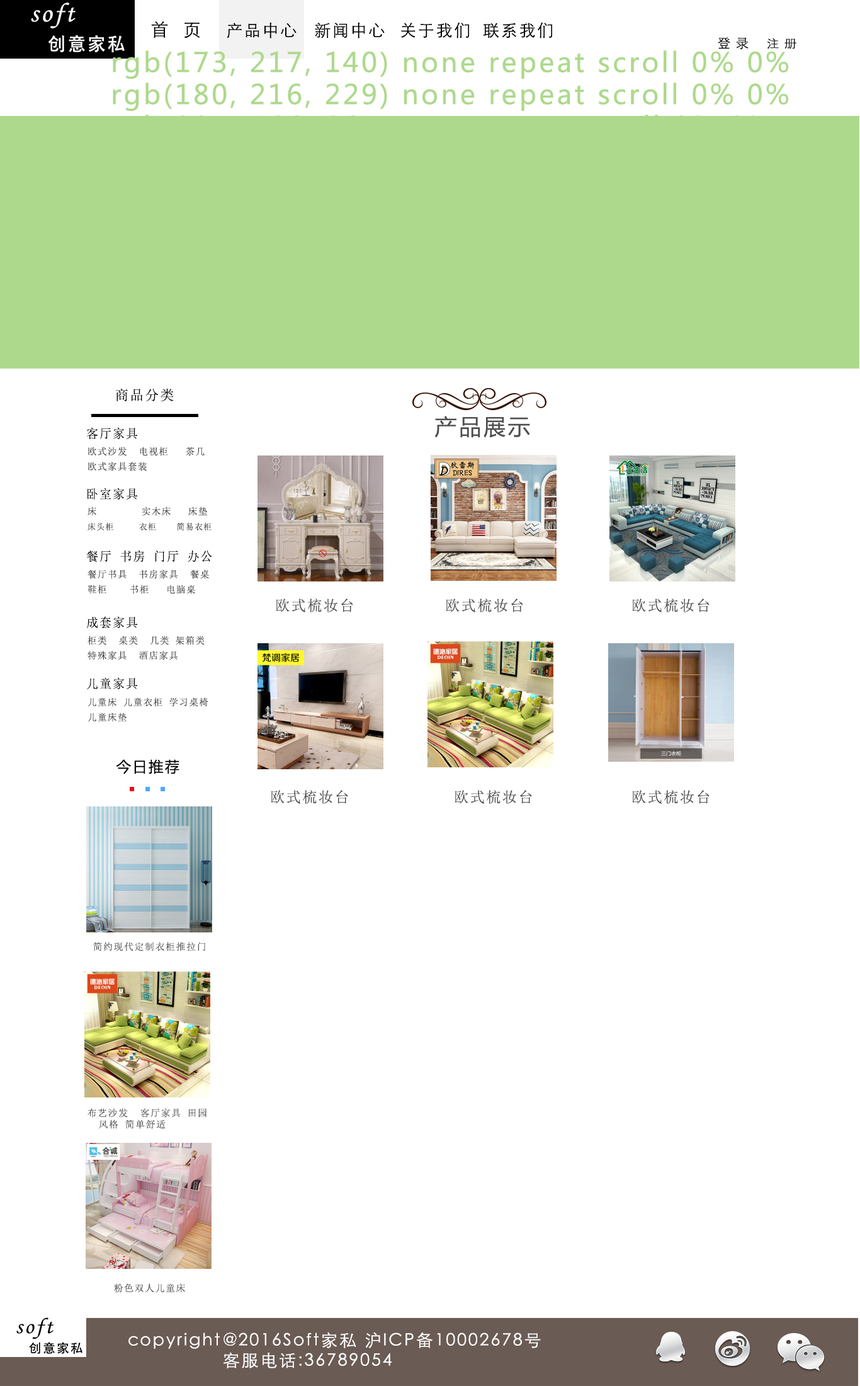
<style>
.page{position:relative;width:860px;height:1386px;background:#ffffff}
.page>*{position:absolute;margin:0}
.t1{font:26.9px "MonotypeCorsiva";letter-spacing:0.1em;color:#ffffff}
.t2{font:17.6px "STXihei";letter-spacing:0.1em;color:#000000}
.t3{font:16.5px "STXihei";letter-spacing:0.1em;color:#000000}
.t4{font:18.4px "AdobeHeitiStd-Regular";letter-spacing:0.1em;color:#ffffff}
.t5{font:13.1px "STXihei";letter-spacing:0.1em;color:#000000;scale:0.96 1}
.t6{font:11.4px "STXihei";letter-spacing:0.1em;color:#000000;scale:1.06 1}
.t7{font:26.7px "MicrosoftYaHei";letter-spacing:0.1em;color:#add98c}
.t8{font:13.8px "SimSun";letter-spacing:0.1em;color:#000000}
.t9{font:22.1px "MicrosoftYaHei";letter-spacing:0.1em;color:#4f4e4e}
.t10{font:12.5px "SimSun";letter-spacing:0.1em;color:#000000;scale:0.96 1}
.t11{font:9.4px "NSimSun";letter-spacing:0.1em;color:#3f3e3e}
.t12{font:8.4px "NSimSun";letter-spacing:0.1em;color:#3f3e3e}
.t13{font:14.7px "SimSun";letter-spacing:0.1em;color:#4f4e4e}
.t14{font:14.7px "MicrosoftYaHei";letter-spacing:0.1em;color:#000000}
.t15{font:9.4px "SimSun";letter-spacing:0.1em;color:#4f4e4e}
.t16{font:22.4px "MonotypeCorsiva";letter-spacing:0.1em;color:#000000}
.t17{font:16.8px "STXihei";letter-spacing:0.1em;color:#ffffff}
.t18{font:12.5px "AdobeHeitiStd-Regular";letter-spacing:0.1em;color:#000000}
</style>
<div class="page">
<p class="t1" style="left:31px;top:3px;width:45px;height:25px">soft</p>
<p class="t2" style="left:151px;top:21px;width:49px;height:17px">首  页</p>
<p class="t3" style="left:227px;top:22px;width:70px;height:16px">产品中心</p>
<p class="t3" style="left:315px;top:22px;width:70px;height:16px">新闻中心</p>
<p class="t3" style="left:401px;top:22px;width:68px;height:16px">关于我们</p>
<p class="t3" style="left:483px;top:22px;width:69px;height:16px">联系我们</p>
<p class="t4" style="left:49px;top:35px;width:76px;height:17px">创意家私</p>
<p class="t5" style="left:718px;top:37px;width:31px;height:13px">登 录</p>
<p class="t6" style="left:767px;top:38px;width:30px;height:11px">注 册</p>
<p class="t7" style="left:113px;top:50px;width:676px;height:125px">rgb(173, 217, 140) none repeat scroll 0% 0%<br>rgb(180, 216, 229) none repeat scroll 0% 0%<br>rgb(227, 166, 86) none repeat scroll 0% 0%<br>rgb(99, 201, 173) none repeat scroll 0% 0%</p>
<p class="t8" style="left:115px;top:388px;width:59px;height:14px">商品分类</p>
<p class="t9" style="left:435px;top:416px;width:95px;height:22px">产品展示</p>
<p class="t10" style="left:86px;top:427px;width:52px;height:13px">客厅家具</p>
<p class="t11" style="left:88px;top:447px;width:117px;height:24px">欧式沙发  电视柜   茶几<br><br>欧式家具套装</p>
<p class="t10" style="left:87px;top:488px;width:51px;height:12px">卧室家具</p>
<p class="t12" style="left:88px;top:506px;width:124px;height:25px"><span class="t11">床        实木床   床垫<br><br></span>床头柜     衣柜    简易衣柜</p>
<p class="t10" style="left:86px;top:550px;width:126px;height:13px">餐厅 书房 门厅 办公</p>
<p class="t11" style="left:88px;top:569px;width:121px;height:25px">餐厅书具  书房家具  餐桌<br><br>鞋柜    书柜   电脑桌</p>
<p class="t13" style="left:276px;top:598px;width:77px;height:14px">欧式梳妆台</p>
<p class="t13" style="left:446px;top:598px;width:77px;height:14px">欧式梳妆台</p>
<p class="t13" style="left:632px;top:598px;width:78px;height:14px">欧式梳妆台</p>
<p class="t10" style="left:86px;top:616px;width:52px;height:13px">成套家具</p>
<p class="t11" style="left:88px;top:636px;width:117px;height:24px">柜类  桌类  几类 架箱类<br><br>特殊家具  酒店家具</p>
<p class="t10" style="left:87px;top:677px;width:51px;height:13px">儿童家具</p>
<p class="t11" style="left:88px;top:697px;width:121px;height:25px">儿童床 儿童衣柜 学习桌椅<br><br>儿童床垫</p>
<p class="t14" style="left:116px;top:759px;width:64px;height:15px">今日推荐</p>
<p class="t13" style="left:271px;top:790px;width:77px;height:14px">欧式梳妆台</p>
<p class="t13" style="left:455px;top:790px;width:77px;height:14px">欧式梳妆台</p>
<p class="t13" style="left:632px;top:790px;width:78px;height:14px">欧式梳妆台</p>
<p class="t15" style="left:93px;top:942px;width:112px;height:9px">简约现代定制衣柜推拉门</p>
<p class="t15" style="left:88px;top:1108px;width:119px;height:21px">布艺沙发  客厅家具 田园<br>  风格 简单舒适</p>
<p class="t15" style="left:114px;top:1283px;width:71px;height:10px">粉色双人儿童床</p>
<p class="t16" style="left:16px;top:1317px;width:38px;height:22px">soft</p>
<p class="t17" style="left:129px;top:1332px;width:412px;height:36px">copyright@2016Soft家私 沪ICP备10002678号<br>                客服电话:36789054</p>
<p class="t18" style="left:29px;top:1342px;width:54px;height:12px">创意家私</p>
</div>
